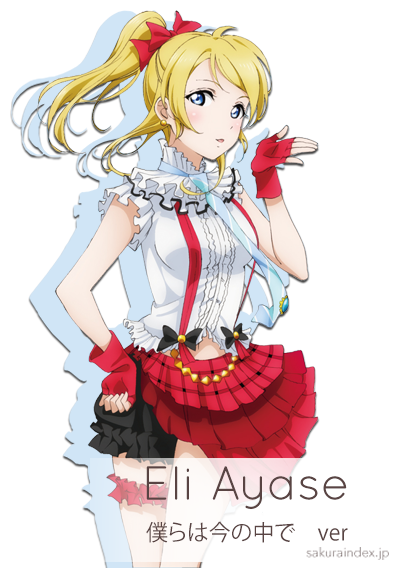
<style>
.page{position:relative;width:405px;height:568px;background:#ffffff}
.page>*{position:absolute;margin:0}
.t1{font:48px "QuicksandBook-Regular";color:#594443}
.t2{font:22.1px "KozGoPr6N-Regular";color:#594443}
.t3{font:12.8px "AvenirNextLTPro-Regular";color:#8e8281}
</style>
<div class="page">
<p class="t1" style="left:146px;top:466px;width:201px;height:43px">Eli Ayase</p>
<p class="t2" style="left:146px;top:521px;width:202px;height:22px">僕らは今の中で　ver</p>
<p class="t3" style="left:306px;top:547px;width:83px;height:13px">sakuraindex.jp</p>
</div>
